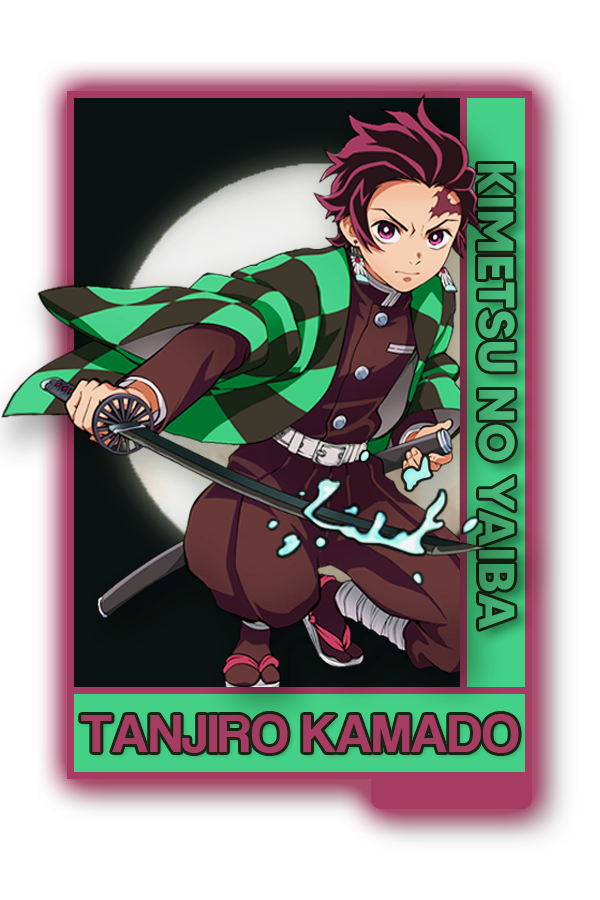
<style>
.page{position:relative;width:600px;height:900px;background:#ffffff}
.page>*{position:absolute;margin:0}
.t1{font:50.2px "MADETOMMY-Bold";color:#43af74}
.t2{font:56.3px "CoolveticaRg-Regular";color:#944352}
</style>
<div class="page">
<p class="t1" style="left:478px;top:164px;width:37px;height:465px;rotate:90deg">KIMETSU NO YAIBA</p>
<p class="t2" style="left:81px;top:714px;width:438px;height:39px">TANJIRO KAMADO</p>
</div>
